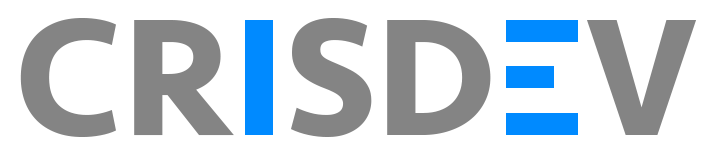
<style>
.page{position:relative;width:722px;height:153px;background:#ffffff}
.page>*{position:absolute;margin:0}
.t1{font:172px "Seravek-Bold";color:#848484}
</style>
<div class="page">
<p class="t1" style="left:20px;top:18px;width:214px;height:119px">CR</p>
<p class="t1" style="left:291px;top:18px;width:200px;height:119px">SD</p>
<p class="t1" style="left:587px;top:20px;width:110px;height:115px">V</p>
</div>
